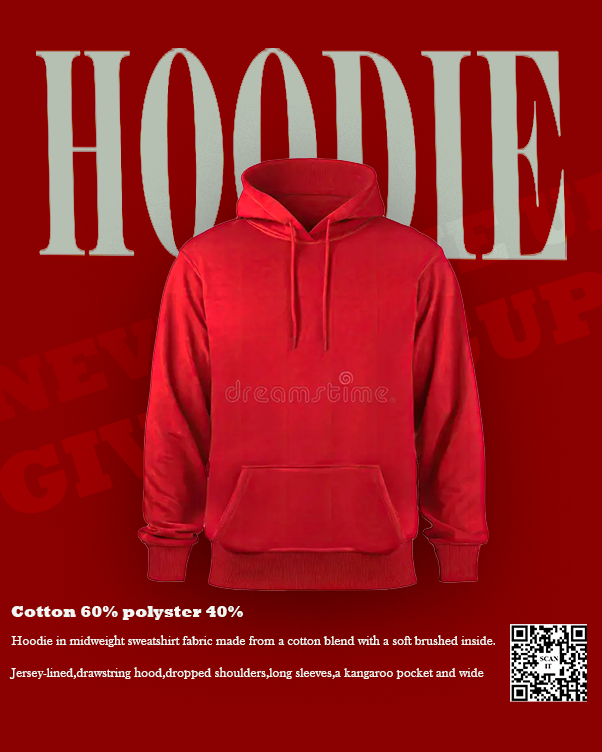
<style>
.page{position:relative;width:602px;height:752px;background:#8b0000}
.page>*{position:absolute;margin:0}
.t1{font:16.2px "Rockwell-ExtraBold";color:#f2f5f1}
.t2{font:13.4px "BaskOldFace";color:#f2f5f1}
</style>
<div class="page">
<p class="t1" style="left:11px;top:606px;width:232px;height:14px">Cotton 60% polyster 40%</p>
<p class="t2" style="left:9px;top:635px;width:486px;height:44px">Hoodie in midweight sweatshirt fabric made from a cotton blend with a soft brushed inside.<br><br>Jersey-lined,drawstring hood,dropped shoulders,long sleeves,a kangaroo pocket and wide <br> <br>ribbing at the cuffs and hem</p>
</div>
